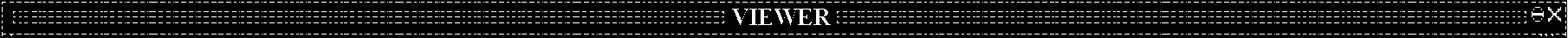
<style>
.page{position:relative;width:1568px;height:38px;background:#000000}
.page>*{position:absolute;margin:0}
.t1{font:24.3px "TimesNewRomanPS-BoldMT";letter-spacing:-0.02em;color:#ffffff}
</style>
<div class="page">
<p class="t1" style="left:731px;top:9px;width:100px;height:16px">VIEWER</p>
</div>
